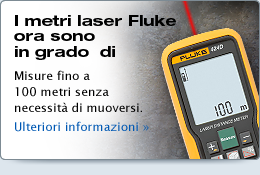
<style>
.page{position:relative;width:260px;height:175px}
.page>*{position:absolute;margin:0}
.t1{font:15px/15.5px "HelveticaNeueLTStd-BdEx";color:#000000}
.t2{font:12px/12px "LucidaSans";color:#000000}
.t3{font:12px/5px "LucidaSans";color:#0058b3}
.t4{font:12px/14.4px "LucidaSans";color:#0058b3}
</style>
<div class="page">
<p class="t1" style="left:14px;top:15px;width:162px;height:45px">I metri laser Fluke <br>ora sono <br>in grado  di</p>
<p class="t2" style="left:15px;top:70px;width:134px;height:62px">Misure fino a <br>100 metri senza <br>necessità di muoversi.<br><span class="t3">Ulteriori informazioni </span><span class="t4">»</span></p>
</div>
